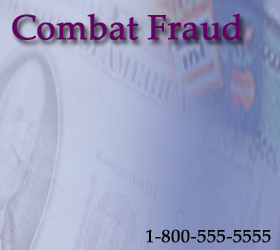
<style>
.page{position:relative;width:280px;height:250px}
.page>*{position:absolute;margin:0}
.t1{font:35px "PalatinoLinotype-Roman";letter-spacing:-0.01em;color:#630460;font-weight:bold}
.t2{font:18px "PalatinoLinotype-Roman";letter-spacing:0.01em;color:#060606;font-weight:bold}
</style>
<div class="page">
<p class="t1" style="left:12px;top:13px;width:231px;height:27px">Combat Fraud</p>
<p class="t2" style="left:146px;top:229px;width:125px;height:14px">1-800-555-5555</p>
</div>
